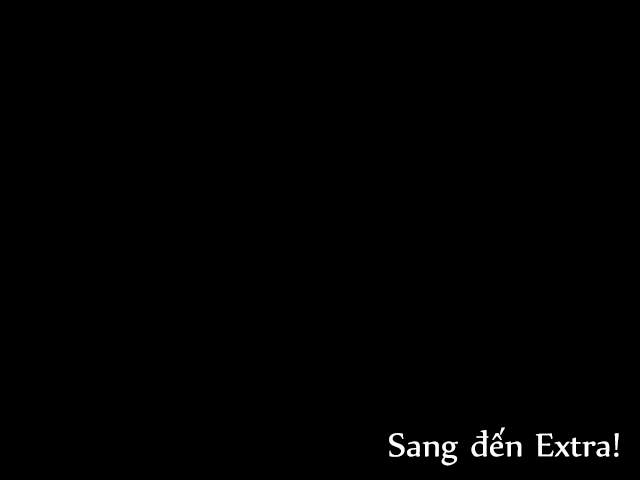
<style>
.page{position:relative;width:640px;height:480px;background:#000000}
.page>*{position:absolute;margin:0}
.t1{font:40px "UTM-Nyala";color:#ffffff}
</style>
<div class="page">
<p class="t1" style="left:389px;top:427px;width:230px;height:39px">Sang đến Extra!</p>
</div>
